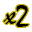
<style>
.page{position:relative;width:32px;height:32px;background:#ffffff}
.page>*{position:absolute;margin:0}
.t1{font:32px "Mistral";color:#000000}
</style>
<div class="page">
<p class="t1" style="left:3px;top:5px;width:26px;height:22px">x2</p>
</div>
